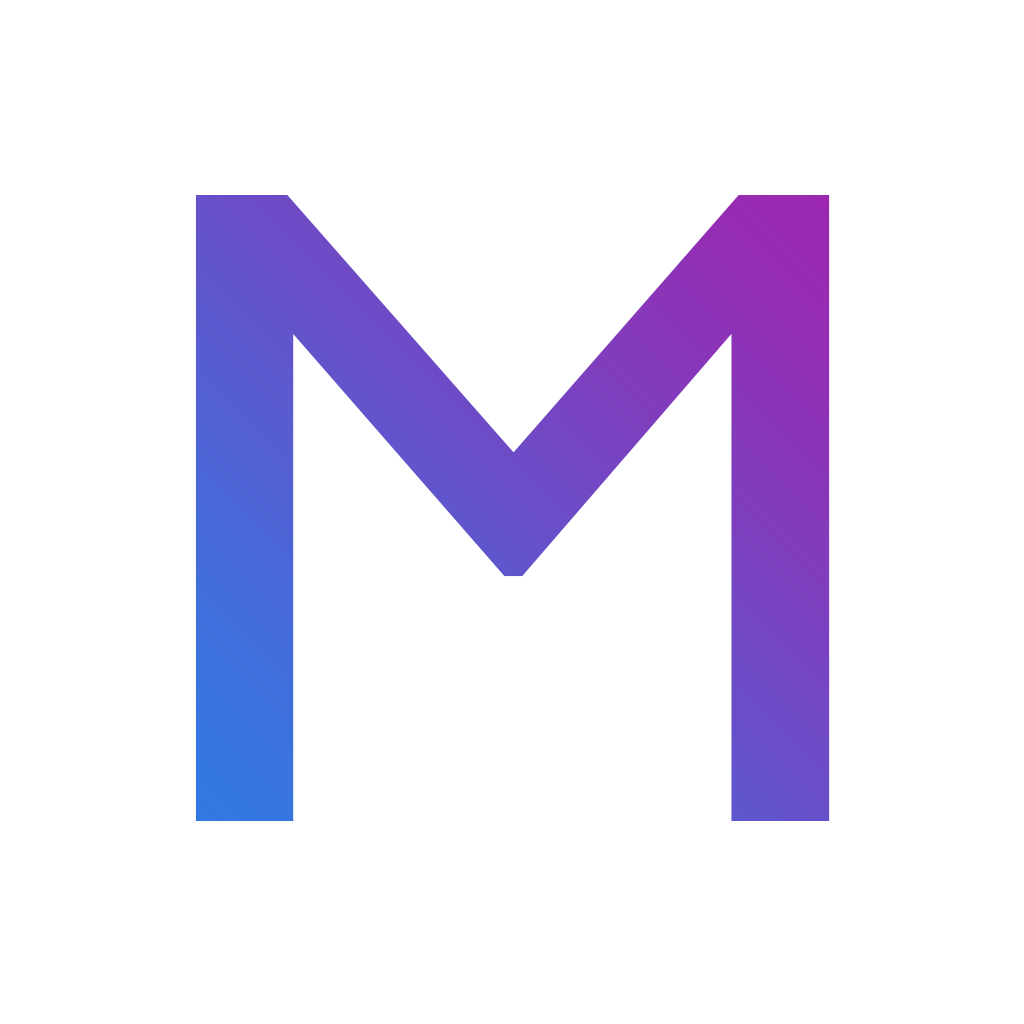
<style>
.page{position:relative;width:1024px;height:1024px;background:#ffffff}
.page>*{position:absolute;margin:0}
.t1{font:916.6px "GillSansMT";scale:1.09 1}
</style>
<div class="page">
<p class="t1" style="left:195px;top:195px;width:635px;height:626px">M</p>
</div>
